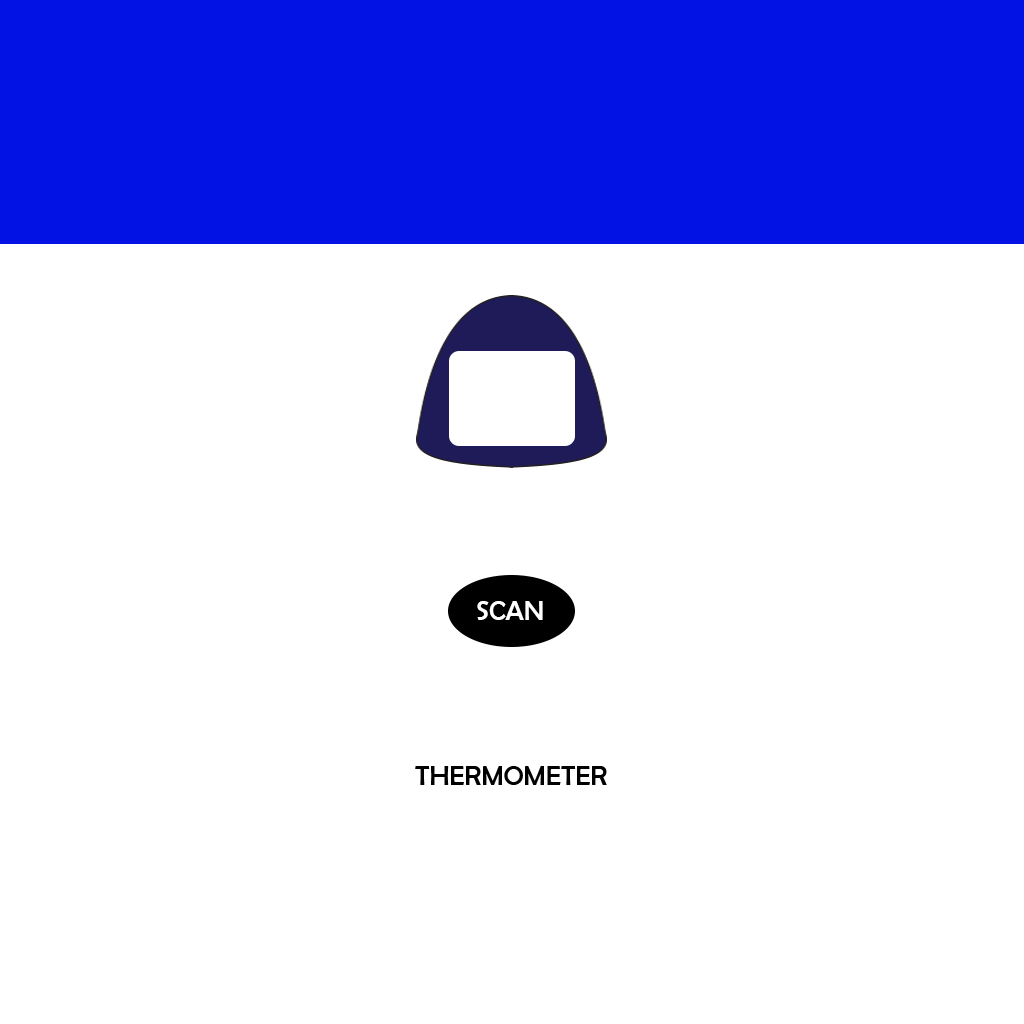
<style>
.page{position:relative;width:1024px;height:1024px;background:#ffffff}
.page>*{position:absolute;margin:0}
.t1{font:28px "BerlinSansFB-Reg";color:#fefefe}
.t2{font:28px "BerlinSansFB-Reg";color:#010101}
</style>
<div class="page">
<p class="t1" style="left:477px;top:601px;width:66px;height:19px">SCAN</p>
<p class="t2" style="left:415px;top:766px;width:192px;height:19px">THERMOMETER</p>
</div>
